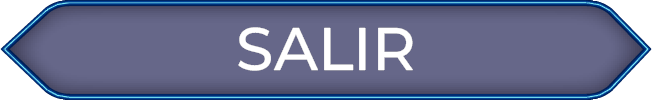
<style>
.page{position:relative;width:652px;height:100px;background:#666789}
.page>*{position:absolute;margin:0}
.t1{font:60px "Montserrat-Medium";color:#ffffff}
</style>
<div class="page">
<p class="t1" style="left:238px;top:27px;width:175px;height:44px">SALIR</p>
</div>
